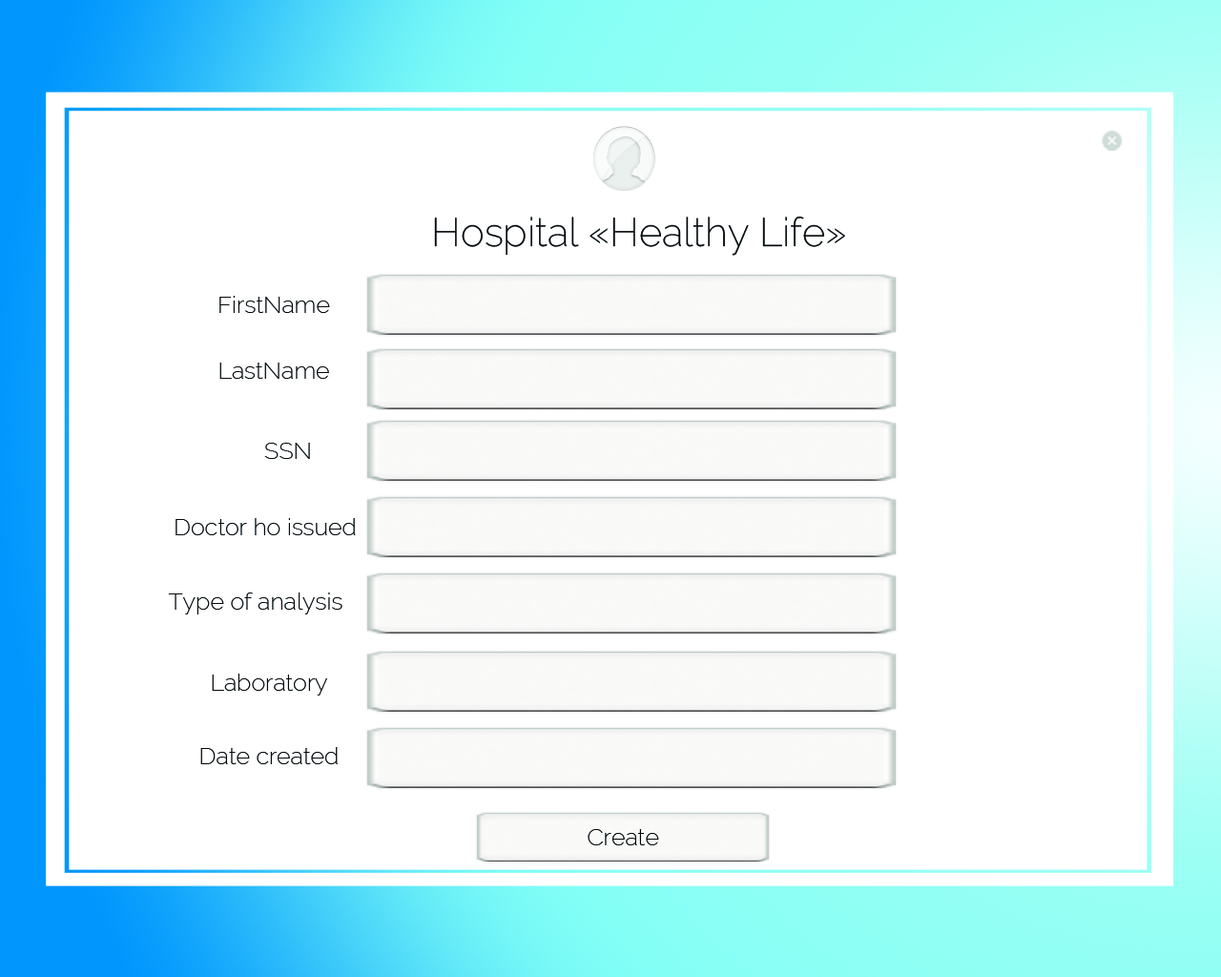
<style>
.page{position:relative;width:1221px;height:977px;background:#ffffff}
.page>*{position:absolute;margin:0}
.t1{font:39.7px "Raleway-ExtraLight";color:#050708}
.t2{font:23.8px "Raleway-ExtraLight";color:#050708}
</style>
<div class="page">
<p class="t1" style="left:434px;top:216px;width:411px;height:40px">Hospital «Healthy Life»</p>
<p class="t2" style="left:219px;top:296px;width:111px;height:17px">FirstName</p>
<p class="t2" style="left:219px;top:362px;width:110px;height:17px">LastName</p>
<p class="t2" style="left:264px;top:443px;width:46px;height:16px">SSN</p>
<p class="t2" style="left:176px;top:518px;width:180px;height:17px">Doctor ho issued</p>
<p class="t2" style="left:168px;top:592px;width:174px;height:22px">Type of analysis</p>
<p class="t2" style="left:212px;top:673px;width:115px;height:22px">Laboratory</p>
<p class="t2" style="left:200px;top:747px;width:138px;height:17px">Date created</p>
<p class="t2" style="left:588px;top:829px;width:71px;height:16px">Create</p>
</div>
